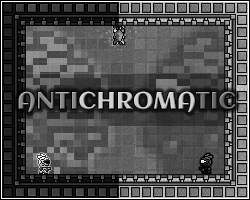
<style>
.page{position:relative;width:250px;height:200px}
.page>*{position:absolute;margin:0}
.t1{font:24px "Aclonica-Regular";color:#d0d0d0}
.t2{font:24px "Aclonica-Regular";color:#888888}
.t3{font:24px "Aclonica-Regular";color:#696969}
</style>
<div class="page">
<p class="t1" style="left:18px;top:91px;width:218px;height:22px"><span class="t2">ANTI</span>CHROMA<span class="t3">TIC</span></p>
</div>
